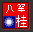
<style>
.page{position:relative;width:33px;height:32px;background:#f20000}
.page>*{position:absolute;margin:0}
.t1{font:10.4px "SimSun";color:#ffffff}
.t2{font:11.7px "SimSun";color:#ffffff}
</style>
<div class="page">
<p class="t1" style="left:6px;top:4px;width:19px;height:9px">八军</p>
<p class="t2" style="left:16px;top:15px;width:11px;height:12px">桂</p>
</div>
